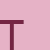
<style>
.page{position:relative;width:50px;height:50px;background:#e6b2c6}
.page>*{position:absolute;margin:0}
.t1{font:42px "ArialMT";color:#742543}
</style>
<div class="page">
<p class="t1" style="left:0px;top:20px;width:24px;height:30px">T</p>
</div>
